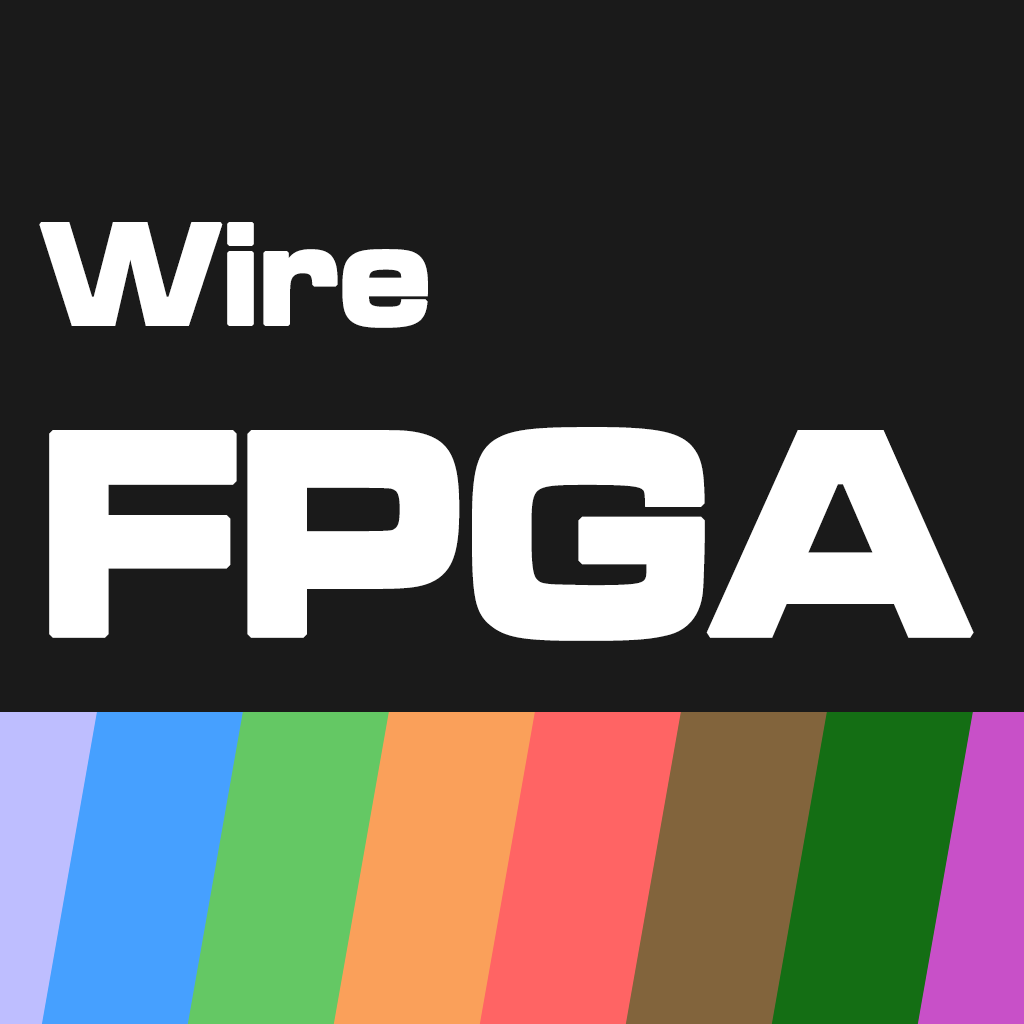
<style>
.page{position:relative;width:1024px;height:1024px;background:#1a1a1a}
.page>*{position:absolute;margin:0}
.t1{font:150px "MicrogrammaD-BoldExte";color:#ffffff;font-weight:bold;scale:0.85 1}
.t2{font:300px "MicrogrammaD-BoldExte";color:#ffffff;font-weight:bold;scale:0.85 1}
</style>
<div class="page">
<p class="t1" style="left:39px;top:222px;width:389px;height:106px">Wire</p>
<p class="t2" style="left:49px;top:427px;width:925px;height:214px">FPGA</p>
</div>
